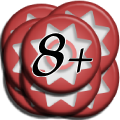
<style>
.page{position:relative;width:120px;height:120px}
.page>*{position:absolute;margin:0}
.t1{font:68px "Kings-Regular";color:#000000}
</style>
<div class="page">
<p class="t1" style="left:32px;top:33px;width:61px;height:44px">8+</p>
</div>
